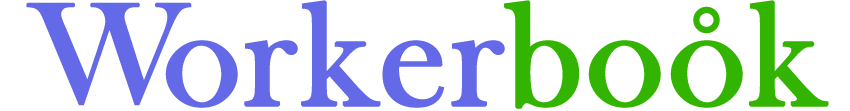
<style>
.page{position:relative;width:850px;height:111px;background:#ffffff}
.page>*{position:absolute;margin:0}
.t1{font:150px "BaskOldFace";color:#6469e7;font-weight:bold}
.t2{font:150px "BaskOldFace";color:#33b400;font-weight:bold}
</style>
<div class="page">
<p class="t1" style="left:26px;top:2px;width:166px;height:104px">W</p>
<p class="t1" style="left:165px;top:0px;width:340px;height:108px">orker</p>
<p class="t2" style="left:504px;top:0px;width:325px;height:109px">book</p>
<p class="t2" style="left:693px;top:6px;width:27px;height:28px">˚</p>
</div>
